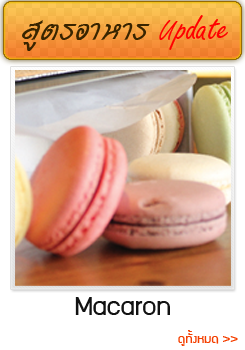
<style>
.page{position:relative;width:245px;height:350px}
.page>*{position:absolute;margin:0}
.t1{font:42px "DSEFreeJack";letter-spacing:0.005em;color:#382400}
.t2{font:42px "DSEFreeJack";letter-spacing:0.005em;color:#ff0000}
.t3{font:30px "supermarket";letter-spacing:0.005em;color:#121212}
.t4{font:14px "supermarket";letter-spacing:0.005em;color:#f43f00}
</style>
<div class="page">
<p class="t1" style="left:22px;top:15px;width:206px;height:36px">สูตรอาหาร <span class="t2">Update</span></p>
<p class="t3" style="left:75px;top:297px;width:95px;height:18px">Macaron</p>
<p class="t4" style="left:178px;top:330px;width:60px;height:16px">ดูทั้งหมด &gt;&gt;</p>
</div>
